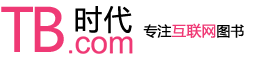
<style>
.page{position:relative;width:261px;height:60px;background:#ffffff}
.page>*{position:absolute;margin:0}
.t1{font:60px "MicrosoftYaHei";letter-spacing:-0.075em;color:#ef3975}
.t2{font:28px "MicrosoftYaHei";letter-spacing:0.067em;color:#000000}
.t3{font:14.7px "MicrosoftYaHei";color:#ef3975}
.t4{font:13.7px "MicrosoftYaHei";color:#000000}
</style>
<div class="page">
<p class="t1" style="left:1px;top:6px;width:63px;height:46px">TB</p>
<p class="t2" style="left:75px;top:6px;width:57px;height:28px">时代</p>
<p class="t3" style="left:143px;top:23px;width:101px;height:15px"><span class="t4">专注</span>互联网<span class="t4">图书</span></p>
</div>
